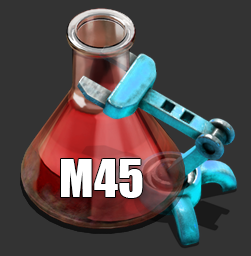
<style>
.page{position:relative;width:251px;height:256px;background:#333333}
.page>*{position:absolute;margin:0}
.t1{font:48px "Impact";color:#ffffff}
</style>
<div class="page">
<p class="t1" style="left:61px;top:159px;width:82px;height:39px">M45</p>
</div>
